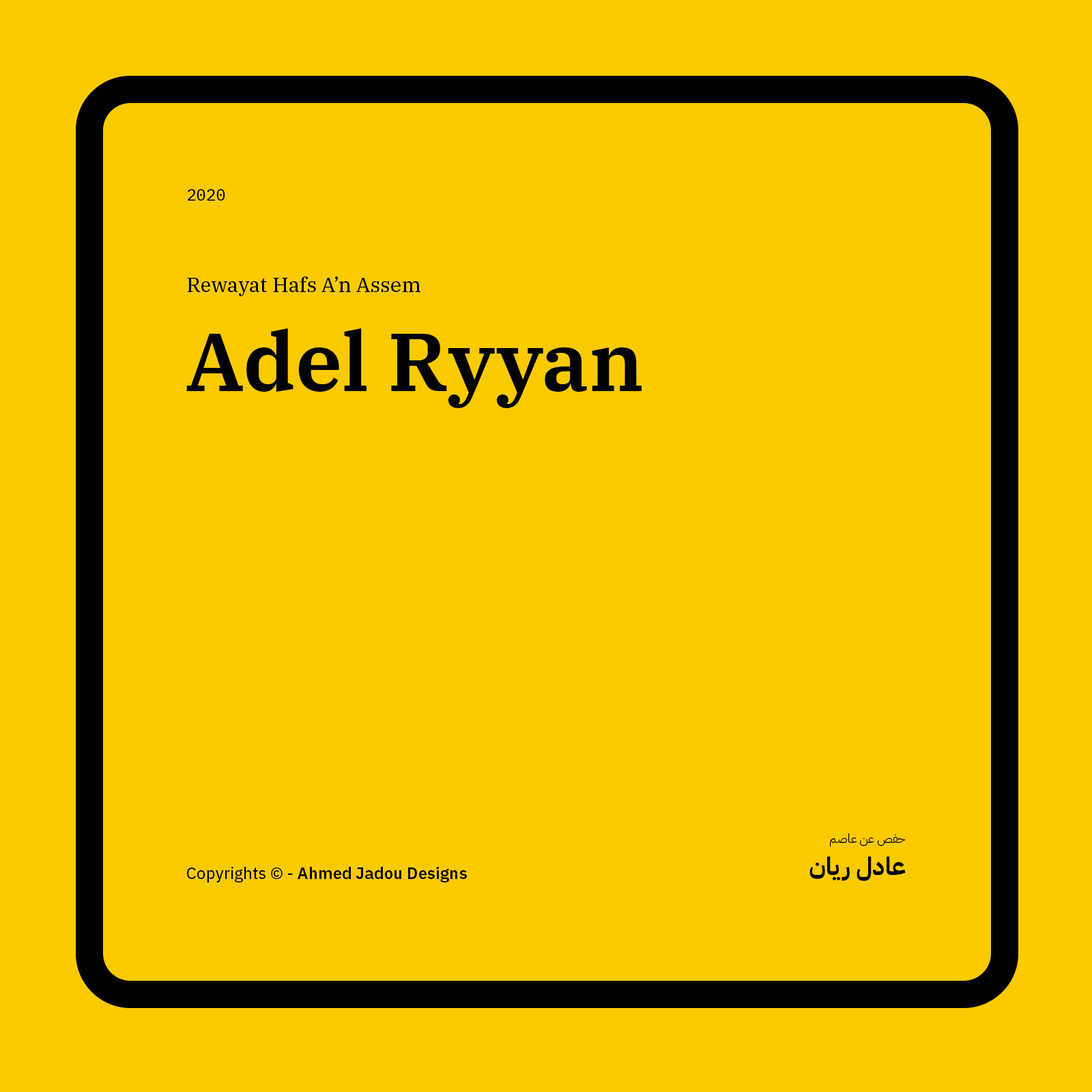
<style>
.page{position:relative;width:1092px;height:1092px;background:#facb00}
.page>*{position:absolute;margin:0}
.t1{font:16.4px "IBMPlexMono-Text";color:#000000}
.t2{font:20.5px "IBMPlexSerif-Text";color:#000000}
.t3{font:81.9px "IBMPlexSerif-SemiBold";color:#000000}
.t4{font:12.3px "IBMPlexArabic-Light";color:#000000}
.t5{font:24.6px "IBMPlexArabic-Bold";color:#000000}
.t6{font:16.4px "IBMPlexSans-SemiBold";color:#000000}
.t7{font:16.4px "IBMPlexSans-Text";color:#000000}
</style>
<div class="page">
<p class="t1" style="left:188px;top:189px;width:37px;height:12px">2020</p>
<p class="t2" style="left:187px;top:276px;width:233px;height:20px">Rewayat Hafs A’n Assem</p>
<p class="t3" style="left:186px;top:328px;width:456px;height:80px">Adel Ryyan</p>
<p class="t4" style="left:830px;top:833px;width:76px;height:14px">حفص عن عاصم</p>
<p class="t5" style="left:809px;top:857px;width:97px;height:24px">عادل ريان</p>
<p class="t6" style="left:187px;top:867px;width:280px;height:15px"><span class="t7">Copyrights © - </span>Ahmed Jadou Designs</p>
</div>
